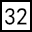
<style>
.page{position:relative;width:32px;height:32px;background:#ffffff}
.page>*{position:absolute;margin:0}
.t1{font:24px "SimHei";color:#000000}
</style>
<div class="page">
<p class="t1" style="left:5px;top:8px;width:22px;height:17px">32</p>
</div>
